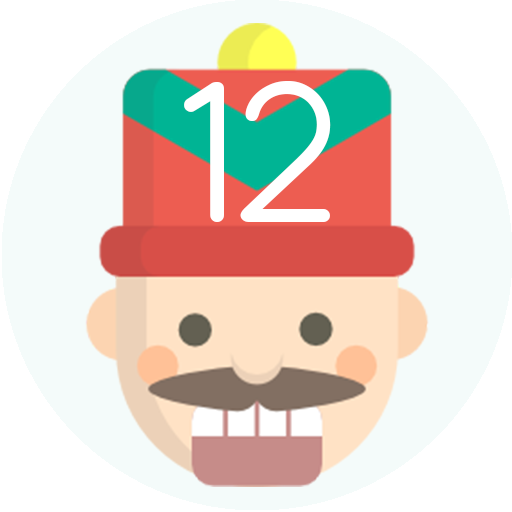
<style>
.page{position:relative;width:512px;height:512px;background:#f4fbfa}
.page>*{position:absolute;margin:0}
.t1{font:220.4px "Antipasto";color:#ffffff}
</style>
<div class="page">
<p class="t1" style="left:184px;top:81px;width:147px;height:141px">12</p>
</div>
